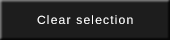
<style>
.page{position:relative;width:170px;height:40px;background:#1d1d1d}
.page>*{position:absolute;margin:0}
.t1{font:12px "LiberationSans";letter-spacing:0.1em;color:#ffffff}
</style>
<div class="page">
<p class="t1" style="left:37px;top:15px;width:96px;height:9px">Clear selection</p>
</div>
